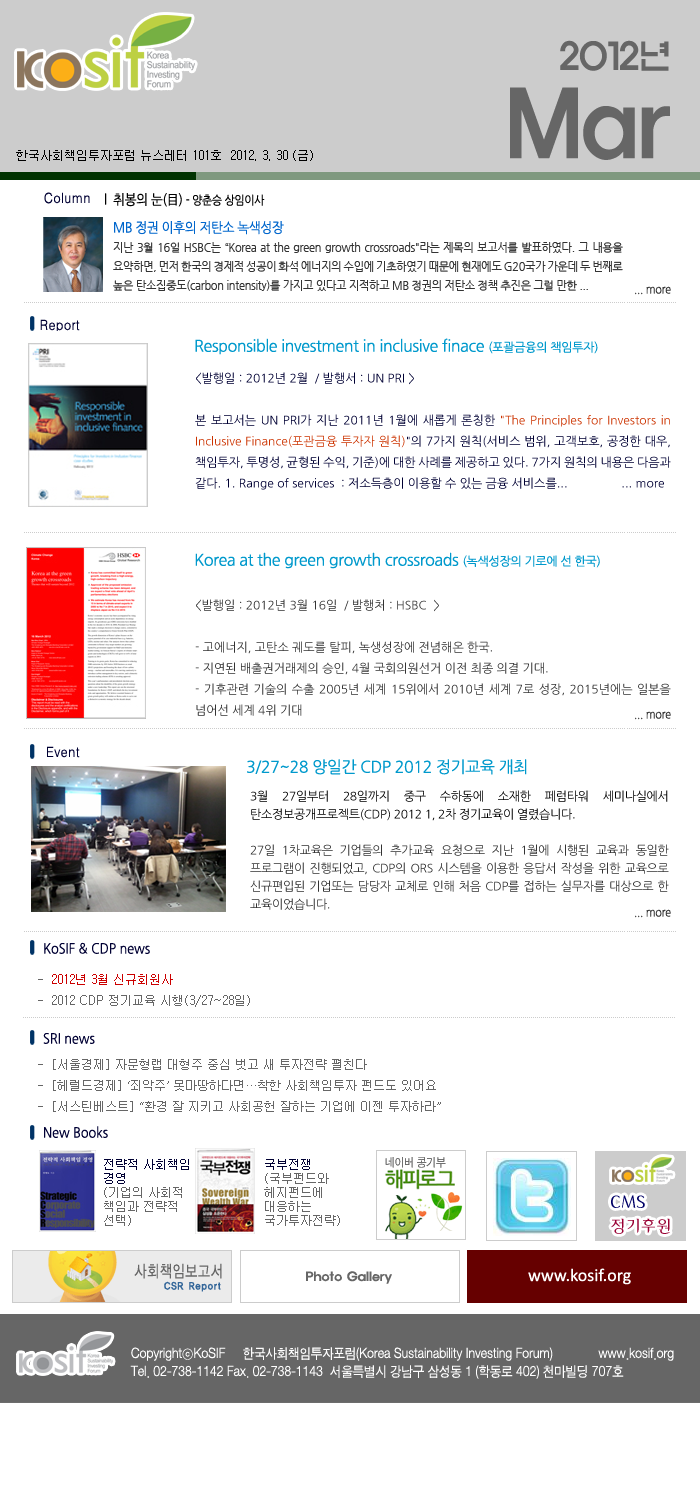
<style>
.page{position:relative;width:700px;height:1500px;background:#ffffff}
.page>*{position:absolute;margin:0}
.t1{font:36.1px/41.9px "ExpoM-HM";color:#666666;scale:0.89 1}
.t2{font:90.2px/41.9px "ExpoM-HM";color:#666666;scale:0.89 1}
.t3{font:12px "Gulim";color:#000000}
.t4{font:14px "H2gtrM";color:#000033;scale:0.9 1}
.t5{font:14px "NanumGothic";letter-spacing:-0.025em;color:#000000;scale:0.9 1}
.t6{font:12px "NanumGothic";letter-spacing:-0.025em;color:#000000;scale:0.9 1}
.t7{font:14px "NanumGothic";letter-spacing:-0.025em;color:#0066cc;scale:0.9 1}
.t8{font:11px "NanumGothic";letter-spacing:-0.025em;color:#333333}
.t9{font:12px "NanumGothic";letter-spacing:-0.025em;color:#333333;scale:0.9 1}
.t10{font:16px "NanumGothic";letter-spacing:-0.025em;color:#0099cc}
.t11{font:12px "NanumGothic";letter-spacing:-0.025em;color:#0099cc}
.t12{font:12px "NanumGothic";color:#000033}
.t13{font:12px "NanumGothic";color:#cc3300}
.t14{font:12px "NanumGothic";color:#333333}
.t15{font:12px/18px "NanumGothic";letter-spacing:-0.025em;color:#333333}
.t16{font:12px/18px "NanumGothic";letter-spacing:-0.025em;color:#000000}
.t17{font:14px "NanumGothic";color:#000033;scale:0.9 1}
.t18{font:12px "Gulim";color:#666666}
.t19{font:12px "Gulim";color:#cc0000}
.t20{font:12px/14px "Gulim";color:#666666}
.t21{font:12px/14px "Gulim";color:#000033}
</style>
<div class="page">
<p class="t1" style="left:510px;top:40px;width:160px;height:120px;text-align:right">2012년<br><span class="t2">Mar</span></p>
<p class="t3" style="left:16px;top:150px;width:297px;height:11px">한국사회책임투자포럼 뉴스레터 101호  2012. 3. 30 (금)</p>
<p class="t4" style="left:44px;top:192px;width:46px;height:12px">Column</p>
<p class="t5" style="left:105px;top:193px;width:160px;height:14px">l  취봉의 눈(目) <span class="t6">- 양춘승 상임이사</span></p>
<p class="t7" style="left:114px;top:221px;width:170px;height:14px">MB 정권 이후의 저탄소 녹색성장</p>
<p class="t8" style="left:113px;top:242px;width:510px;height:49px;text-align:justify">지난 3월 16일 HSBC는 “Korea at the green growth crossroads"라는 제목의 보고서를 발표하였다. 그 내용을 요약하면, 먼저 한국의 경제적 성공이 화석 에너지의 수입에 기초하였기 때문에 현재에도 G20국가 가운데 두 번째로 높은 탄소집중도(carbon intensity)를 가지고 있다고 지적하고 MB 정권의 저탄소 정책 추진은 그럴 만한 ...</p>
<p class="t9" style="left:635px;top:286px;width:36px;height:9px">... more</p>
<p class="t4" style="left:40px;top:319px;width:40px;height:13px">Report</p>
<p class="t10" style="left:195px;top:338px;width:403px;height:17px">Responsible investment in inclusive finace <span class="t11">(포괄금융의 책임투자)</span></p>
<p class="t12" style="left:195px;top:372px;width:476px;height:118px;text-align:justify">&lt;발행일 : 2012년 2월  / 발행서 : UN PRI &gt;<br><br>본 보고서는 UN PRI가 지난 2011년 1월에 새롭게 론칭한 <span class="t13">"The Principles for Investors in Inclusive Finance(포관금융 투자자 원칙)</span>"의 7가지 원칙(서비스 범위, 고객보호, 공정한 대우, 책임투자, 투명성, 균형된 수익, 기준)에 대한 사례를 제공하고 있다. 7가지 원칙의 내용은 다음과 같다. 1. Range of services  : 저소득층이 이용할 수 있는 금융 서비스를...                ... more</p>
<p class="t10" style="left:195px;top:552px;width:405px;height:17px">Korea at the green growth crossroads <span class="t11">(녹색성장의 기로에 선 한국)</span></p>
<p class="t14" style="left:195px;top:599px;width:476px;height:117px;text-align:justify">&lt;발행일 : 2012년 3월 16일  / 발행처 : HSBC  &gt;<br><br>- 고에너지, 고탄소 궤도를 탈피, 녹생성장에 전념해온 한국.<br>- 지연된 배출권거래제의 승인, 4월 국회의원선거 이전 최종 의결 기대.<br>- 기후관련 기술의 수출 2005년 세계 15위에서 2010년 세계 7로 성장, 2015년에는 일본을 넘어선 세계 4위 기대</p>
<p class="t9" style="left:635px;top:711px;width:36px;height:9px">... more</p>
<p class="t4" style="left:47px;top:746px;width:33px;height:12px">Event</p>
<p class="t10" style="left:247px;top:759px;width:280px;height:16px">3/27~28 양일간 CDP 2012 정기교육 개최</p>
<p class="t15" style="left:250px;top:790px;width:419px;height:120px;text-align:justify"><span class="t16">3월 27일부터 28일까지 중구 수하동에 소재한 페럼타워 세미나실에서 탄소정보공개프로젝트(CDP) 2012 1, 2차 정기교육이 열렸습니다.</span> <br><br>27일 1차교육은 기업들의 추가교육 요청으로 지난 1월에 시행된 교육과 동일한 프로그램이 진행되었고, CDP의 ORS 시스템을 이용한 응답서 작성을 위한 교육으로 신규편입된 기업또는 담당자 교체로 인해 처음 CDP를 접하는 실무자를 대상으로 한 교육이었습니다.</p>
<p class="t9" style="left:635px;top:909px;width:36px;height:9px">... more</p>
<p class="t17" style="left:44px;top:942px;width:106px;height:12px">KoSIF &amp; CDP news</p>
<p class="t18" style="left:38px;top:974px;width:212px;height:33px">-  <span class="t19">2012년 3월 신규회원사      <br></span>-  2012 CDP 정기교육 시행(3/27~28일)</p>
<p class="t17" style="left:43px;top:1033px;width:52px;height:11px">SRI news</p>
<p class="t18" style="left:38px;top:1059px;width:403px;height:53px">-  [서울경제] 자문형랩 대형주 중심 벗고 새 투자전략 펼친다  <br>-  [헤럴드경제] ‘죄악주’ 못마땅하다면…착한 사회책임투자 펀드도 있어요 <br>-  [서스틴베스트] “환경 잘 지키고 사회공헌 잘하는 기업에 이젠 투자하라”</p>
<p class="t17" style="left:44px;top:1126px;width:64px;height:12px">New Books</p>
<p class="t20" style="left:104px;top:1159px;width:85px;height:67px"><span class="t21">전략적 사회책임 경영<br></span>(기업의 사회적 책임과 전략적 선택)</p>
<p class="t20" style="left:264px;top:1159px;width:76px;height:67px"><span class="t21">국부전쟁</span>(국부펀드와 헤지펀드에 대응하는 국가투자전략)</p>
</div>
